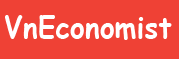
<style>
.page{position:relative;width:180px;height:60px;background:#ef4135}
.page>*{position:absolute;margin:0}
.t1{font:30px "ComicSansMS-Bold";color:#ffffff;scale:0.94 1}
</style>
<div class="page">
<p class="t1" style="left:5px;top:15px;width:167px;height:25px">VnEconomist</p>
</div>
